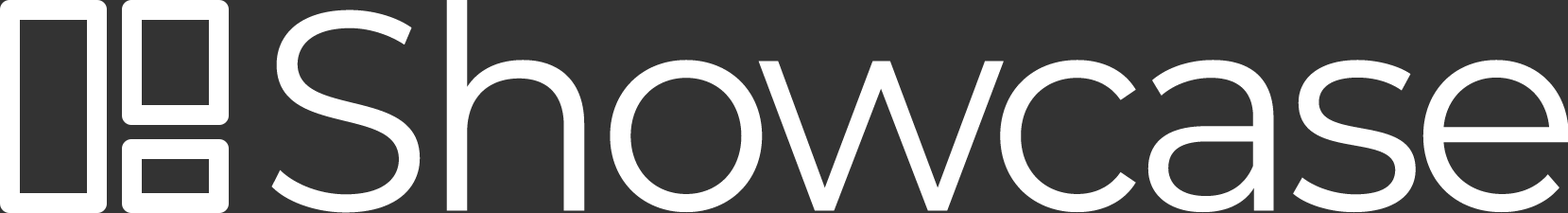
<style>
.page{position:relative;width:1568px;height:213px;background:#333333}
.page>*{position:absolute;margin:0}
.t1{font:283.5px "Montserrat-Regular";letter-spacing:-0.05em;color:#ffffff}
</style>
<div class="page">
<p class="t1" style="left:271px;top:0px;width:1298px;height:213px">Showcase</p>
</div>
